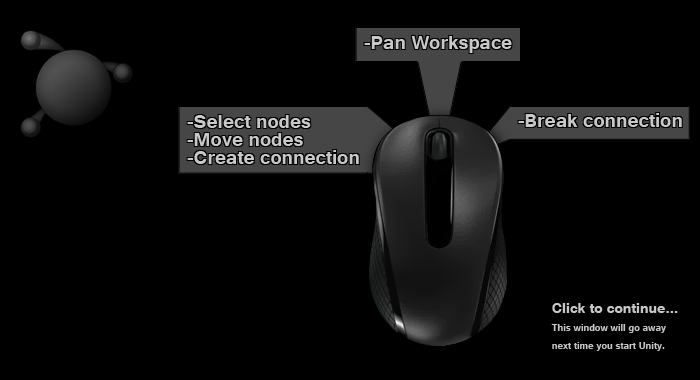
<style>
.page{position:relative;width:700px;height:380px;background:#000000}
.page>*{position:absolute;margin:0}
.t1{font:24px "Tunga-Bold";color:#c8c8c8}
.t2{font:24px/18px "Tunga-Bold";color:#c8c8c8}
.t3{font:12px/18px "Tunga-Bold";color:#c8c8c8}
.t4{font:18px/18px "Tunga-Bold";color:#c8c8c8}
</style>
<div class="page">
<p class="t1" style="left:364px;top:36px;width:148px;height:17px">-Pan Workspace</p>
<p class="t1" style="left:518px;top:113px;width:164px;height:14px">-Break connection</p>
<p class="t2" style="left:187px;top:115px;width:172px;height:49px">-Select nodes<br>-Move nodes<br>-Create connection</p>
<p class="t3" style="left:551px;top:303px;width:127px;height:48px"><span class="t4">Click to continue...<br></span>This window will go away next time you start Unity.</p>
</div>
